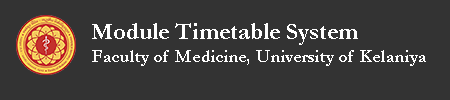
<style>
.page{position:relative;width:450px;height:100px;background:#333333}
.page>*{position:absolute;margin:0}
.t1{font:24px "Garamond-Bold";color:#ffffff}
.t2{font:18px "Garamond-Bold";color:#ffffff}
</style>
<div class="page">
<p class="t1" style="left:92px;top:23px;width:266px;height:22px">Module Timetable System</p>
<p class="t2" style="left:92px;top:50px;width:334px;height:16px">Faculty of Medicine, University of Kelaniya</p>
</div>
